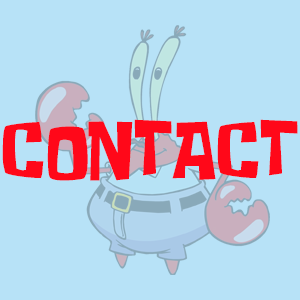
<style>
.page{position:relative;width:300px;height:300px;background:#b7e2f7}
.page>*{position:absolute;margin:0}
.t1{font:58.2px "SpongeboyRegular";color:#ff0819}
</style>
<div class="page">
<p class="t1" style="left:2px;top:119px;width:296px;height:62px">CONTACT</p>
</div>
